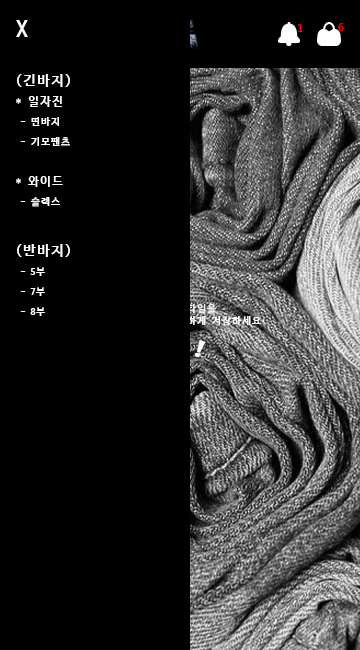
<style>
.page{position:relative;width:360px;height:650px;background:#000000}
.page>*{position:absolute;margin:0}
.t1{font:24px "D2CodingligatureBold";color:#ffffff}
.t2{font:12px "D2CodingBold";color:#f60000}
.t3{font:10px/20px "D2CodingBold";color:#ffffff}
.t4{font:14px/12px "D2CodingBold";color:#ffffff}
.t5{font:12px/20px "D2CodingBold";color:#ffffff}
.t6{font:14px/20px "D2CodingBold";color:#ffffff}
</style>
<div class="page">
<p class="t1" style="left:16px;top:20px;width:12px;height:17px">X</p>
<p class="t2" style="left:297px;top:24px;width:6px;height:8px">1</p>
<p class="t2" style="left:338px;top:23px;width:6px;height:8px">6</p>
<p class="t3" style="left:16px;top:74px;width:54px;height:242px"><span class="t4">(긴바지)<br></span><span class="t5">* 일자진<br></span> - 면바지<br> - 기모팬츠<br><br><span class="t5">* 와이드<br></span> - 슬렉스<br><br><span class="t6">(반바지)<br></span> - 5부<br> - 7부<br> - 8부</p>
</div>
